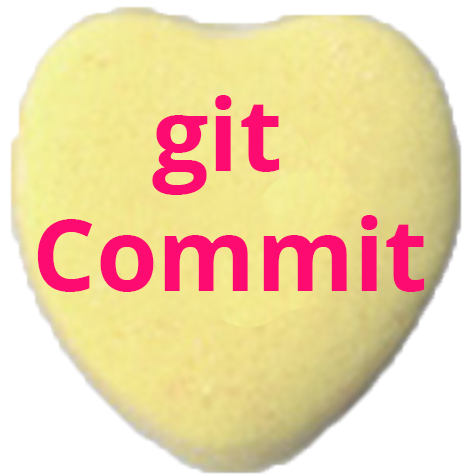
<style>
.page{position:relative;width:462px;height:474px;background:#ffffff}
.page>*{position:absolute;margin:0}
.t1{font:100px "OpenSans-Bold";color:#fe0b72}
</style>
<div class="page">
<p class="t1" style="left:37px;top:95px;width:388px;height:197px;text-align:center">git <br>Commit</p>
</div>
